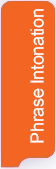
<style>
.page{position:relative;width:56px;height:169px;background:#f36523}
.page>*{position:absolute;margin:0}
.t1{font:18px "ArialMT";letter-spacing:-0.02em;color:#ffffff}
</style>
<div class="page">
<p class="t1" style="left:30px;top:9px;width:14px;height:134px;rotate:-90deg">Phrase Intonation</p>
</div>
